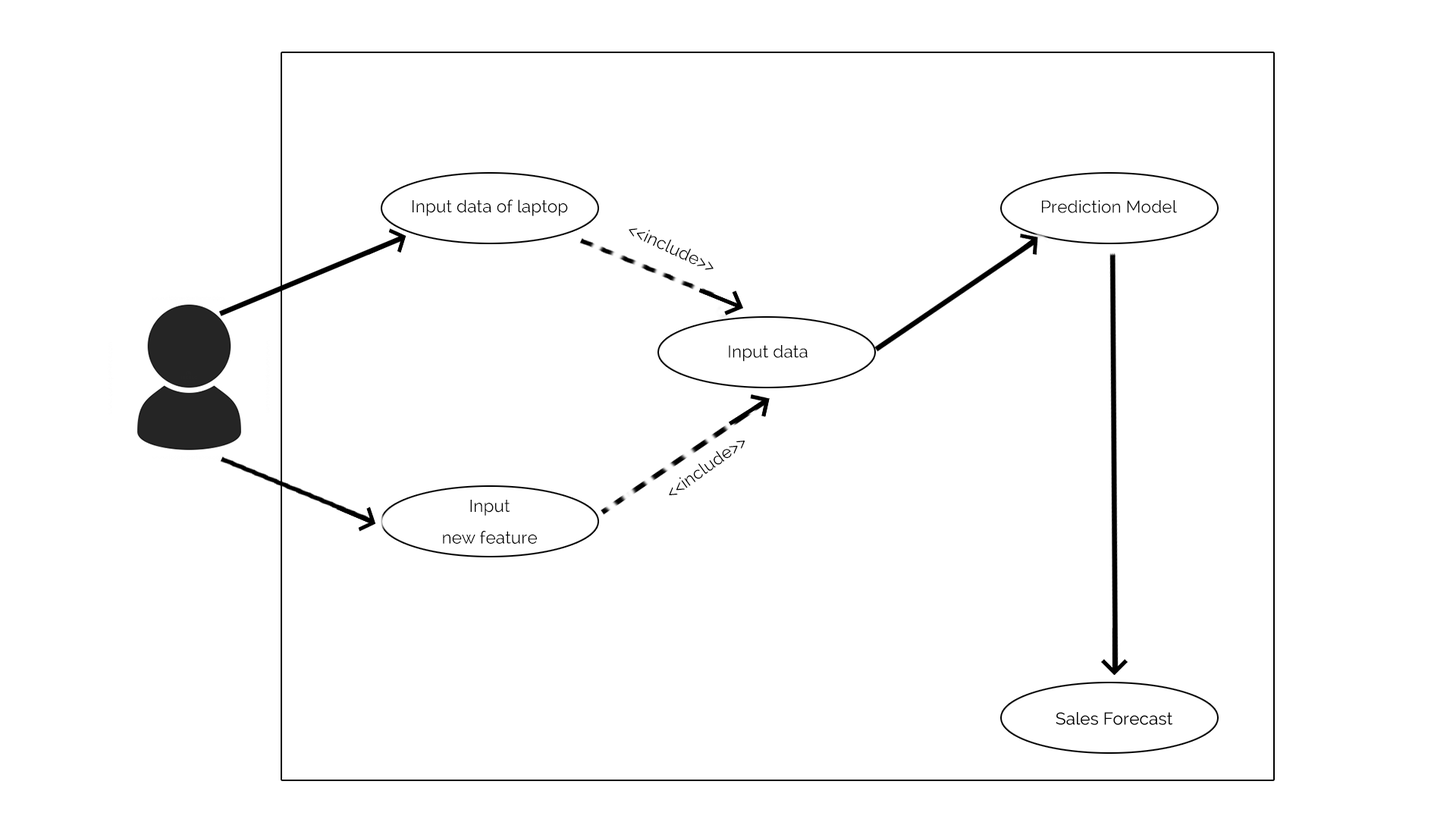
<style>
.page{position:relative;width:1456px;height:819px;background:#ffffff}
.page>*{position:absolute;margin:0}
.t1{font:17.1px "Raleway";letter-spacing:0.008em;color:#000000}
.t2{font:17.1px/31.6px "Raleway";letter-spacing:0.008em;color:#000000}
</style>
<div class="page">
<p class="t1" style="left:413px;top:199px;width:155px;height:17px">Input data of laptop</p>
<p class="t1" style="left:1042px;top:200px;width:135px;height:13px">Prediction Model</p>
<p class="t1" style="left:629px;top:228px;width:85px;height:42px;rotate:25deg">&lt;&lt;include&gt;&gt;</p>
<p class="t1" style="left:729px;top:345px;width:79px;height:17px">Input data</p>
<p class="t1" style="left:669px;top:441px;width:76px;height:55px;rotate:-36deg">&lt;&lt;include&gt;&gt;</p>
<p class="t2" style="left:443px;top:500px;width:94px;height:44px;text-align:center">Input <br>new feature</p>
</div>
